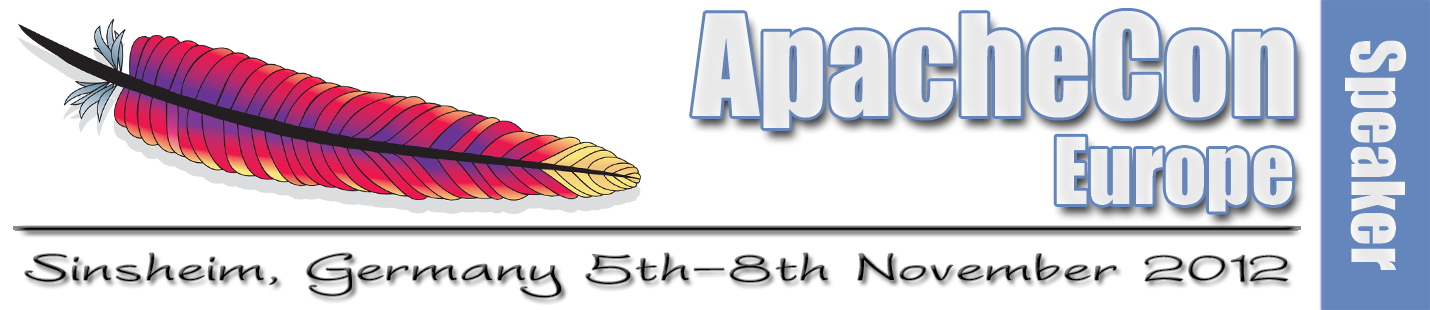
<style>
.page{position:relative;width:1430px;height:310px;background:#ffffff}
.page>*{position:absolute;margin:0}
.t1{font:130px "Impact";color:#ffffff}
.t2{font:68px "Impact";color:#ffffff}
.t3{font:85px "Impact";color:#ffffff}
.t4{font:50px "WorstveldSling";color:#000000;scale:1.96 1}
</style>
<div class="page">
<p class="t1" style="left:692px;top:11px;width:602px;height:117px">ApacheCon</p>
<p class="t2" style="left:1345px;top:40px;width:62px;height:230px;rotate:90deg">Speaker</p>
<p class="t3" style="left:1056px;top:136px;width:236px;height:76px">Europe</p>
<p class="t4" style="left:25px;top:253px;width:1263px;height:45px">Sinsheim, Germany 5th-8th November 2012</p>
</div>
